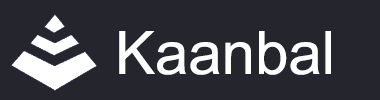
<style>
.page{position:relative;width:380px;height:100px;background:#24252d}
.page>*{position:absolute;margin:0}
.t1{font:60px "ArialMT";color:#ffffff}
</style>
<div class="page">
<p class="t1" style="left:119px;top:31px;width:212px;height:44px">Kaanbal</p>
</div>
